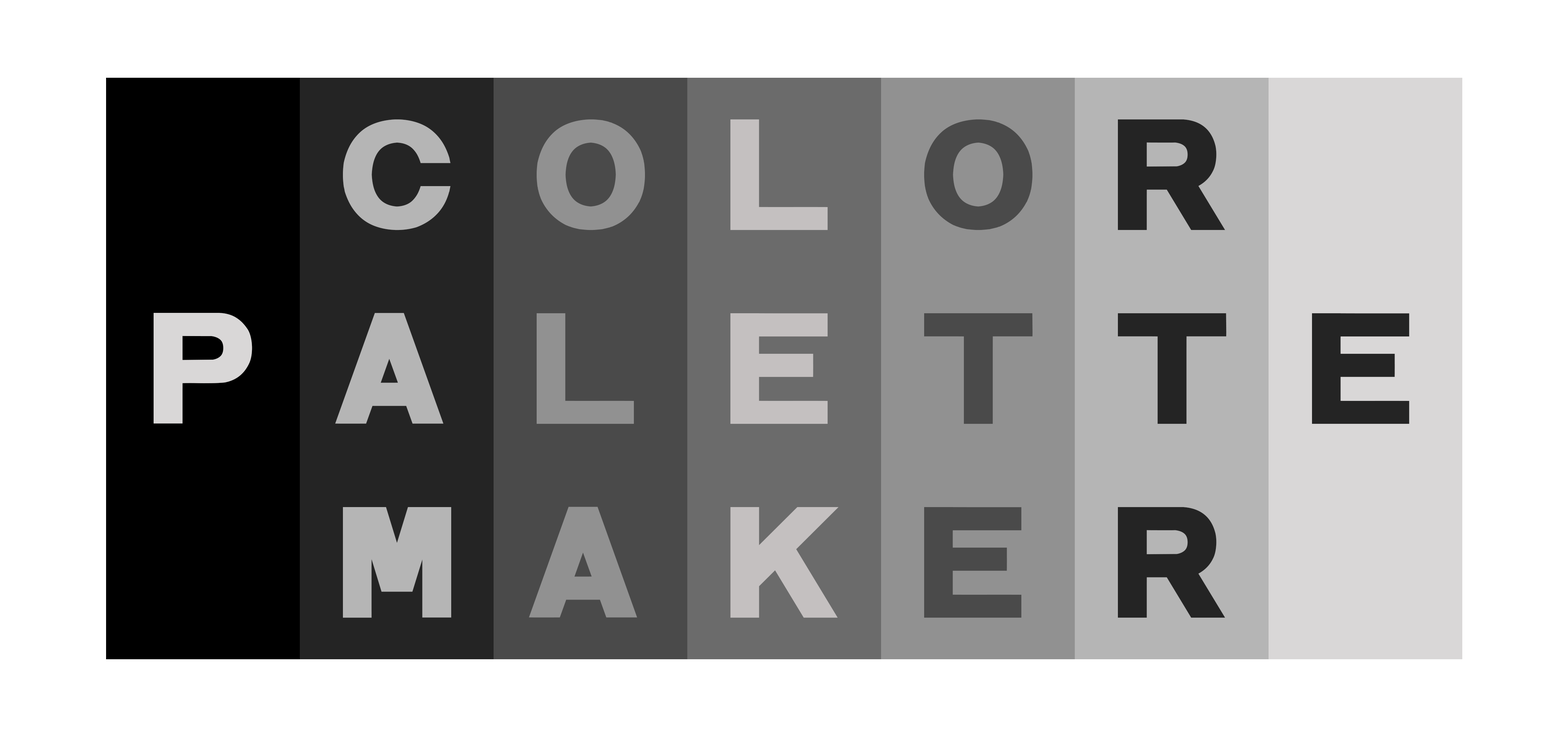
<style>
.page{position:relative;width:1568px;height:737px;background:#ffffff}
.page>*{position:absolute;margin:0}
.t1{font:110.5px "Sematary";letter-spacing:0.38em;color:#b5b5b5;text-transform:uppercase}
.t2{font:110.5px "Sematary";letter-spacing:0.38em;color:#919191;text-transform:uppercase}
.t3{font:110.5px "Sematary";letter-spacing:0.38em;color:#c4c0c0;text-transform:uppercase}
.t4{font:110.5px "Sematary";letter-spacing:0.38em;color:#4a4a4a;text-transform:uppercase}
.t5{font:110.5px "Sematary";letter-spacing:0.38em;color:#242424;text-transform:uppercase}
.t6{font:110.5px "Sematary";letter-spacing:0.38em;color:#d9d7d7;text-transform:uppercase}
</style>
<div class="page">
<p class="t1" style="left:343px;top:119px;width:107px;height:111px">C</p>
<p class="t2" style="left:537px;top:119px;width:108px;height:111px">O</p>
<p class="t3" style="left:730px;top:119px;width:98px;height:111px">l</p>
<p class="t4" style="left:924px;top:119px;width:108px;height:111px">O</p>
<p class="t5" style="left:1118px;top:119px;width:107px;height:111px">R</p>
<p class="t6" style="left:154px;top:313px;width:98px;height:111px">P</p>
<p class="t1" style="left:335px;top:313px;width:108px;height:111px">A</p>
<p class="t2" style="left:537px;top:313px;width:97px;height:111px">L</p>
<p class="t3" style="left:730px;top:313px;width:98px;height:111px">E</p>
<p class="t4" style="left:924px;top:313px;width:109px;height:111px">T</p>
<p class="t5" style="left:1118px;top:313px;width:109px;height:111px">T</p>
<p class="t5" style="left:1312px;top:313px;width:97px;height:111px">E</p>
<p class="t1" style="left:343px;top:507px;width:108px;height:111px">M</p>
<p class="t2" style="left:529px;top:506px;width:108px;height:111px">A</p>
<p class="t3" style="left:730px;top:507px;width:109px;height:111px">K</p>
<p class="t4" style="left:924px;top:507px;width:97px;height:111px">E</p>
<p class="t5" style="left:1118px;top:507px;width:107px;height:111px">R</p>
</div>
